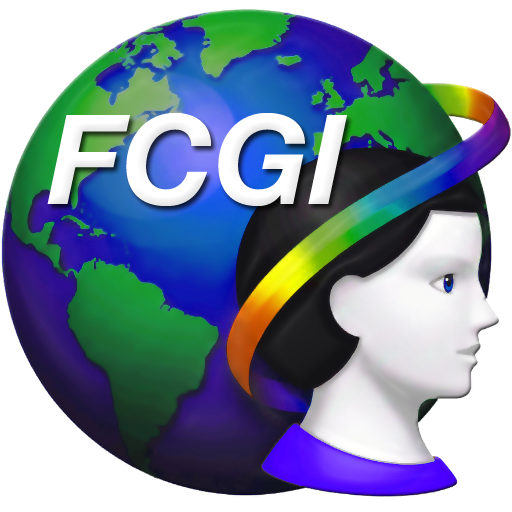
<style>
.page{position:relative;width:512px;height:512px;background:#ffffff}
.page>*{position:absolute;margin:0}
.t1{font:124.9px "HelveticaNeueLTStd-BdIt";color:#ffffff}
</style>
<div class="page">
<p class="t1" style="left:47px;top:113px;width:300px;height:93px">FCGI</p>
</div>
